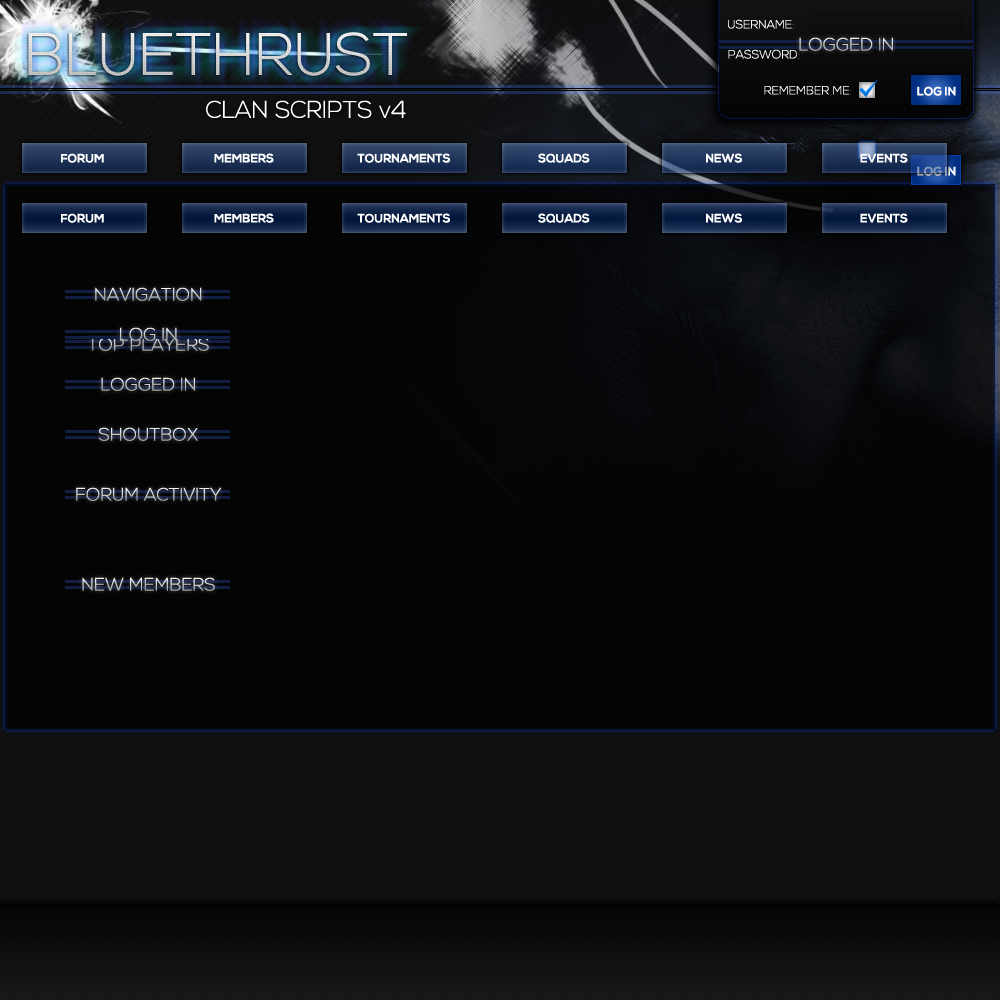
<style>
.page{position:relative;width:1000px;height:1000px;background:#040404}
.page>*{position:absolute;margin:0}
.t1{font:12px "NexaLight";color:#ffffff}
.t2{font:60px "NexaLight";color:#d9d9d9}
.t3{font:18px "NexaLight"}
.t4{font:12px "NexaBold";color:#ffffff}
.t5{font:24px "NexaLight";color:#ffffff}
.t6{font:12px "NexaBold"}
</style>
<div class="page">
<p class="t1" style="left:728px;top:19px;width:66px;height:10px">USERNAME:</p>
<p class="t2" style="left:28px;top:32px;width:379px;height:44px">BLUETHRUST</p>
<p class="t3" style="left:799px;top:37px;width:94px;height:14px">LOGGED IN</p>
<p class="t1" style="left:728px;top:49px;width:72px;height:10px">PASSWORD:</p>
<p class="t1" style="left:764px;top:86px;width:88px;height:9px">REMEMBER ME:</p>
<p class="t4" style="left:917px;top:86px;width:39px;height:10px">LOG IN</p>
<p class="t5" style="left:206px;top:100px;width:200px;height:19px">CLAN SCRIPTS v4</p>
<p class="t4" style="left:61px;top:153px;width:43px;height:10px">FORUM</p>
<p class="t4" style="left:214px;top:153px;width:60px;height:10px">MEMBERS</p>
<p class="t4" style="left:357px;top:153px;width:93px;height:10px">TOURNAMENTS</p>
<p class="t4" style="left:538px;top:153px;width:52px;height:10px">SQUADS</p>
<p class="t4" style="left:706px;top:153px;width:36px;height:10px">NEWS</p>
<p class="t4" style="left:860px;top:153px;width:48px;height:10px">EVENTS</p>
<p class="t6" style="left:917px;top:166px;width:39px;height:10px">LOG IN</p>
<p class="t4" style="left:61px;top:213px;width:43px;height:10px">FORUM</p>
<p class="t4" style="left:214px;top:213px;width:60px;height:10px">MEMBERS</p>
<p class="t4" style="left:357px;top:213px;width:93px;height:10px">TOURNAMENTS</p>
<p class="t4" style="left:538px;top:213px;width:52px;height:10px">SQUADS</p>
<p class="t4" style="left:706px;top:213px;width:36px;height:10px">NEWS</p>
<p class="t4" style="left:860px;top:213px;width:48px;height:10px">EVENTS</p>
<p class="t3" style="left:95px;top:287px;width:107px;height:14px">NAVIGATION</p>
<p class="t3" style="left:120px;top:327px;width:57px;height:14px">LOG IN</p>
<p class="t3" style="left:87px;top:337px;width:122px;height:14px">TOP PLAYERS</p>
<p class="t3" style="left:101px;top:377px;width:94px;height:14px">LOGGED IN</p>
<p class="t3" style="left:98px;top:427px;width:100px;height:14px">SHOUTBOX</p>
<p class="t3" style="left:76px;top:487px;width:146px;height:14px">FORUM ACTIVITY</p>
<p class="t3" style="left:82px;top:577px;width:133px;height:14px">NEW MEMBERS</p>
</div>
